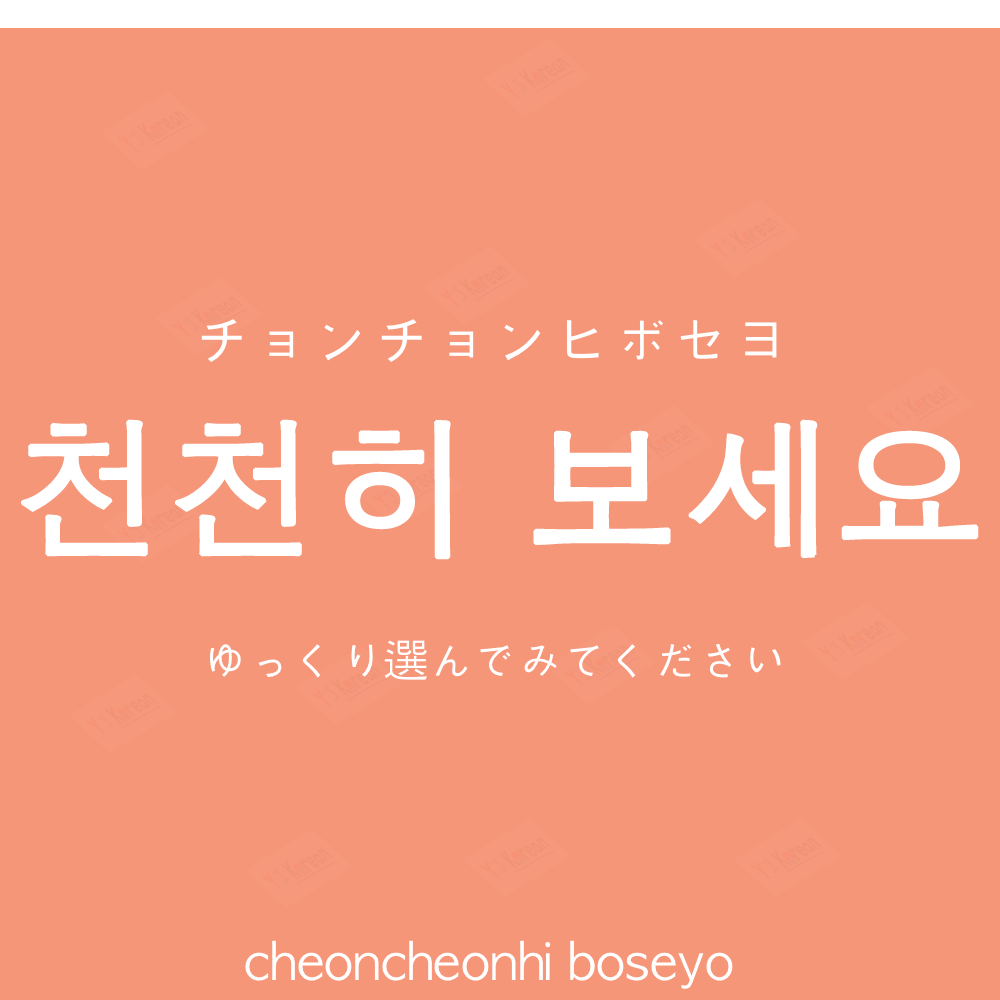
<style>
.page{position:relative;width:1000px;height:1000px;background:#f69679}
.page>*{position:absolute;margin:0}
.t1{font:60px "AppleGothic";color:#ffffff}
.t2{font:150px "AppleGothic";color:#ffffff;font-weight:bold}
.t3{font:45px "AppleGothic";color:#ffffff}
.t4{font:50px "AppleGothic";color:#ffffff}
</style>
<div class="page">
<p class="t1" style="left:201px;top:319px;width:576px;height:43px">チョンチョンヒボセヨ</p>
<p class="t2" style="left:21px;top:419px;width:958px;height:141px">천천히 보세요</p>
<p class="t3" style="left:210px;top:640px;width:571px;height:40px">ゆっくり選んでみてください</p>
<p class="t4" style="left:245px;top:940px;width:488px;height:49px">cheoncheonhi boseyo</p>
</div>
